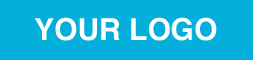
<style>
.page{position:relative;width:253px;height:60px;background:#04b0db}
.page>*{position:absolute;margin:0}
.t1{font:30px "Helvetica-Bold";color:#ffffff}
</style>
<div class="page">
<p class="t1" style="left:35px;top:17px;width:182px;height:24px">YOUR LOGO</p>
</div>
